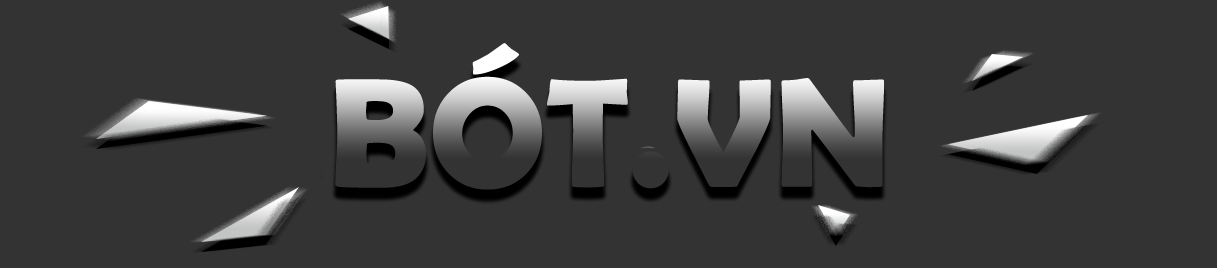
<style>
.page{position:relative;width:1217px;height:268px;background:#333333}
.page>*{position:absolute;margin:0}
.t1{font:156.3px "BerlinSansFBDemi-Bold"}
</style>
<div class="page">
<p class="t1" style="left:335px;top:43px;width:549px;height:147px">BÓT.VN</p>
</div>
